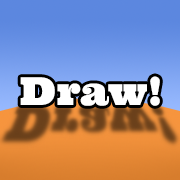
<style>
.page{position:relative;width:180px;height:180px}
.page>*{position:absolute;margin:0}
.t1{font:38.6px "Ultra";color:#ffffff}
</style>
<div class="page">
<p class="t1" style="left:20px;top:76px;width:140px;height:30px">Draw!</p>
</div>
